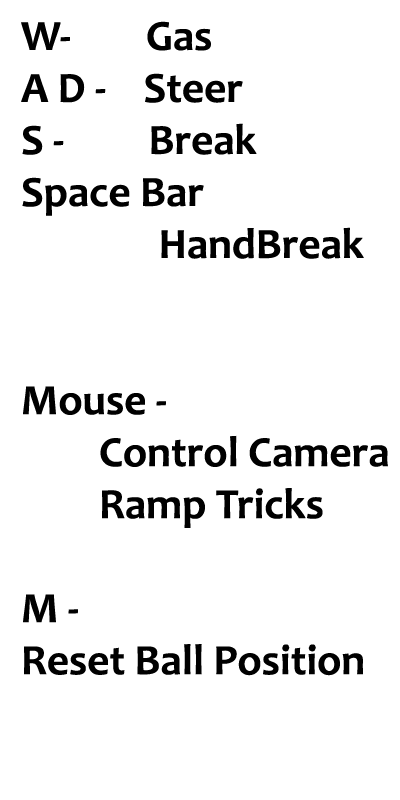
<style>
.page{position:relative;width:400px;height:800px;background:#ffffff}
.page>*{position:absolute;margin:0}
.t1{font:43.4px "Candara-Bold";color:#000000}
</style>
<div class="page">
<p class="t1" style="left:21px;top:21px;width:367px;height:655px">W-        Gas<br>A D -    Steer<br>S -         Break<br>Space Bar<br>            HandBreak<br><br><br>Mouse - <br>     Control Camera<br>     Ramp Tricks<br><br>M -<br>Reset Ball Position</p>
</div>
